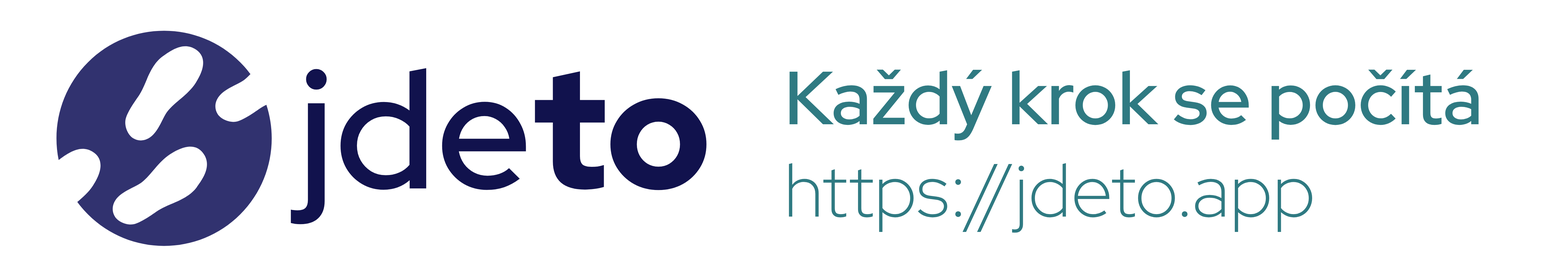
<style>
.page{position:relative;width:1568px;height:277px;background:#ffffff}
.page>*{position:absolute;margin:0}
.t1{font:167.3px "RedHatDisplay-Medium";color:#11124d}
.t2{font:167.3px "RedHatDisplay-Black";color:#11124d}
.t3{font:75.2px "RedHatDisplay-Medium";color:#2f7a82}
.t4{font:75.2px "RedHatDisplay-Light";color:#2f7a82}
</style>
<div class="page">
<p class="t1" style="left:291px;top:68px;width:415px;height:157px">jde<span class="t2">to</span></p>
<p class="t3" style="left:789px;top:70px;width:690px;height:71px">Každý krok se počítá</p>
<p class="t4" style="left:789px;top:163px;width:523px;height:70px">https://jdeto.app</p>
</div>
